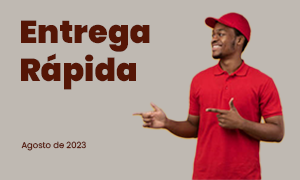
<style>
.page{position:relative;width:300px;height:180px;background:#bfb9b2}
.page>*{position:absolute;margin:0}
.t1{font:31.9px "Poppins-Black";color:#551606}
.t2{font:8.4px "Poppins-Regular";color:#551606}
</style>
<div class="page">
<p class="t1" style="left:21px;top:20px;width:129px;height:70px">Entrega<br>Rápida</p>
<p class="t2" style="left:21px;top:141px;width:65px;height:10px">Agosto de 2023</p>
</div>
